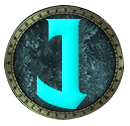
<style>
.page{position:relative;width:130px;height:126px;background:#ffffff}
.page>*{position:absolute;margin:0}
.t1{font:108.8px "LifeCraft";color:#00feff}
</style>
<div class="page">
<p class="t1" style="left:36px;top:19px;width:52px;height:90px">J</p>
</div>
